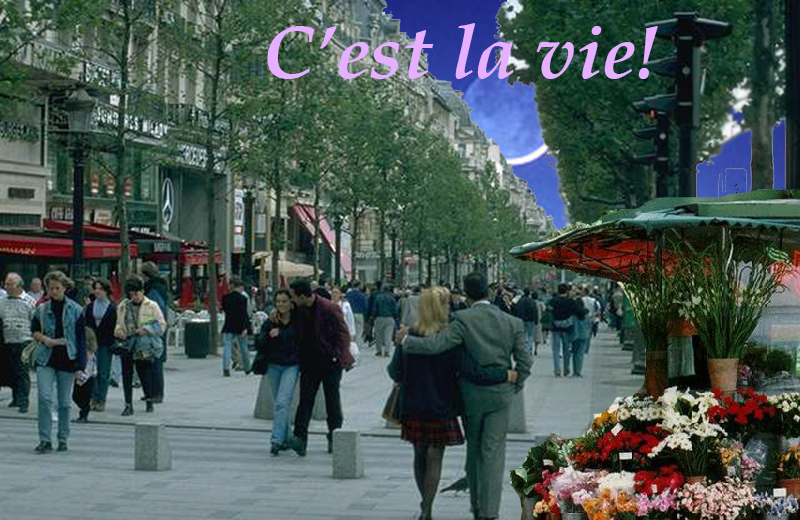
<style>
.page{position:relative;width:800px;height:520px}
.page>*{position:absolute;margin:0}
.t1{font:75px "BookAntiqua-BoldItalic";color:#e7afff}
</style>
<div class="page">
<p class="t1" style="left:267px;top:23px;width:391px;height:56px">C’est la vie!</p>
</div>
